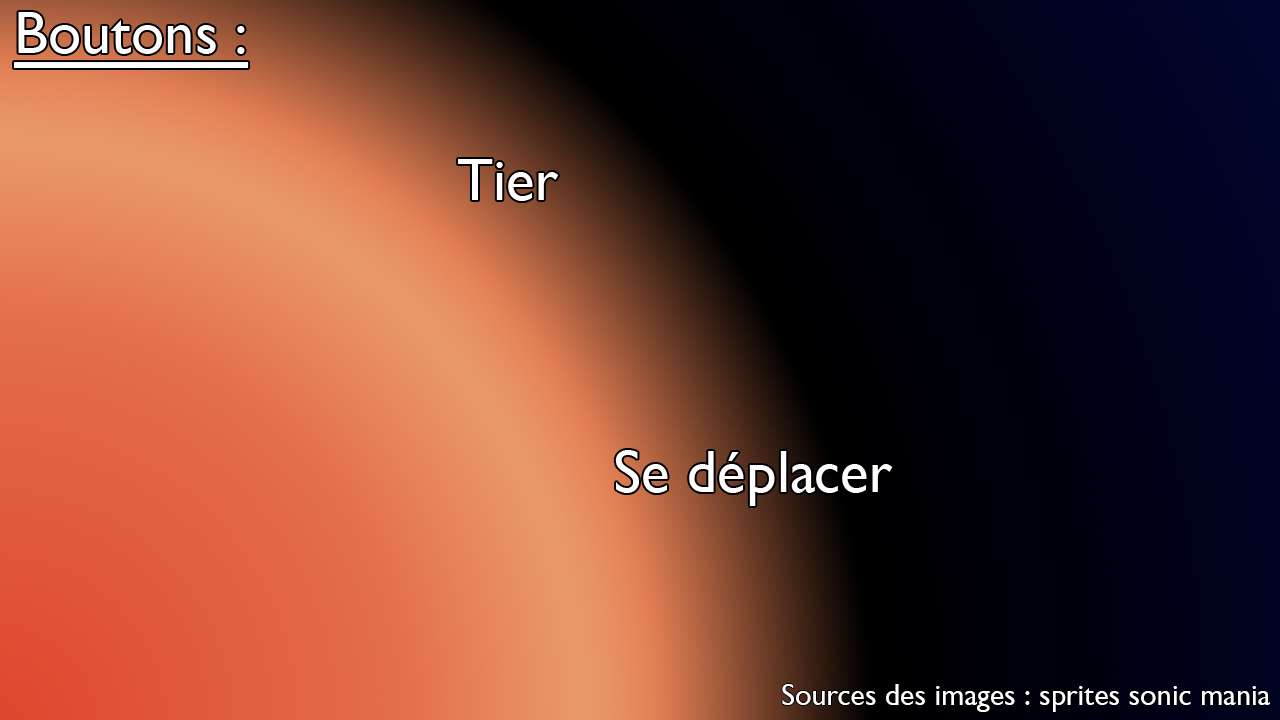
<style>
.page{position:relative;width:1280px;height:720px}
.page>*{position:absolute;margin:0}
.t1{font:60px "GillSansNova";color:#ffffff;text-decoration:underline}
.t2{font:60px "GillSansNova";color:#ffffff}
.t3{font:30px "GillSansNova";color:#ffffff}
</style>
<div class="page">
<p class="t1" style="left:14px;top:12px;width:235px;height:56px">Boutons :</p>
<p class="t2" style="left:458px;top:159px;width:101px;height:42px">Tier</p>
<p class="t2" style="left:615px;top:450px;width:278px;height:56px">Se déplacer</p>
<p class="t3" style="left:782px;top:684px;width:488px;height:28px">Sources des images : sprites sonic mania</p>
</div>
